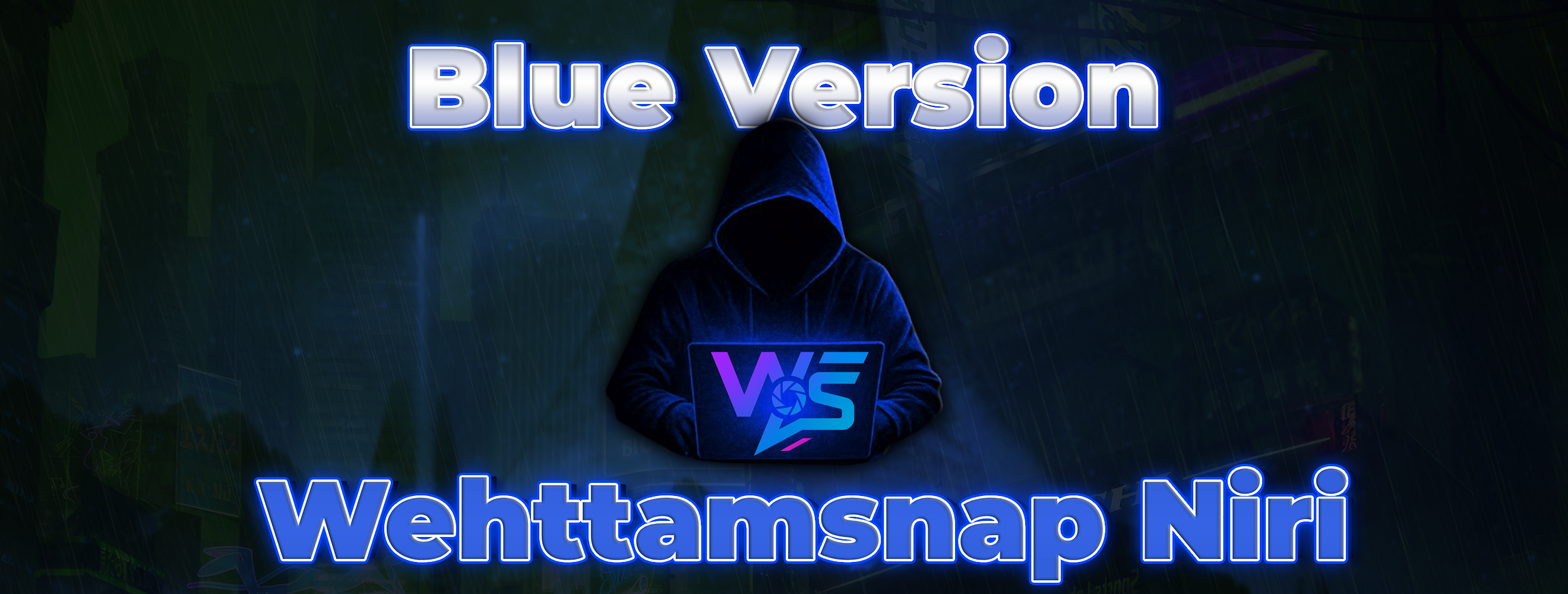
<style>
.page{position:relative;width:1568px;height:594px}
.page>*{position:absolute;margin:0}
.t1{font:110.1px "Montserrat-Black"}
.t2{font:110.1px "Montserrat-Black";color:#3462e0}
</style>
<div class="page">
<p class="t1" style="left:412px;top:35px;width:744px;height:92px">Blue Version</p>
<p class="t2" style="left:258px;top:468px;width:1088px;height:112px">Wehttamsnap Niri</p>
</div>
